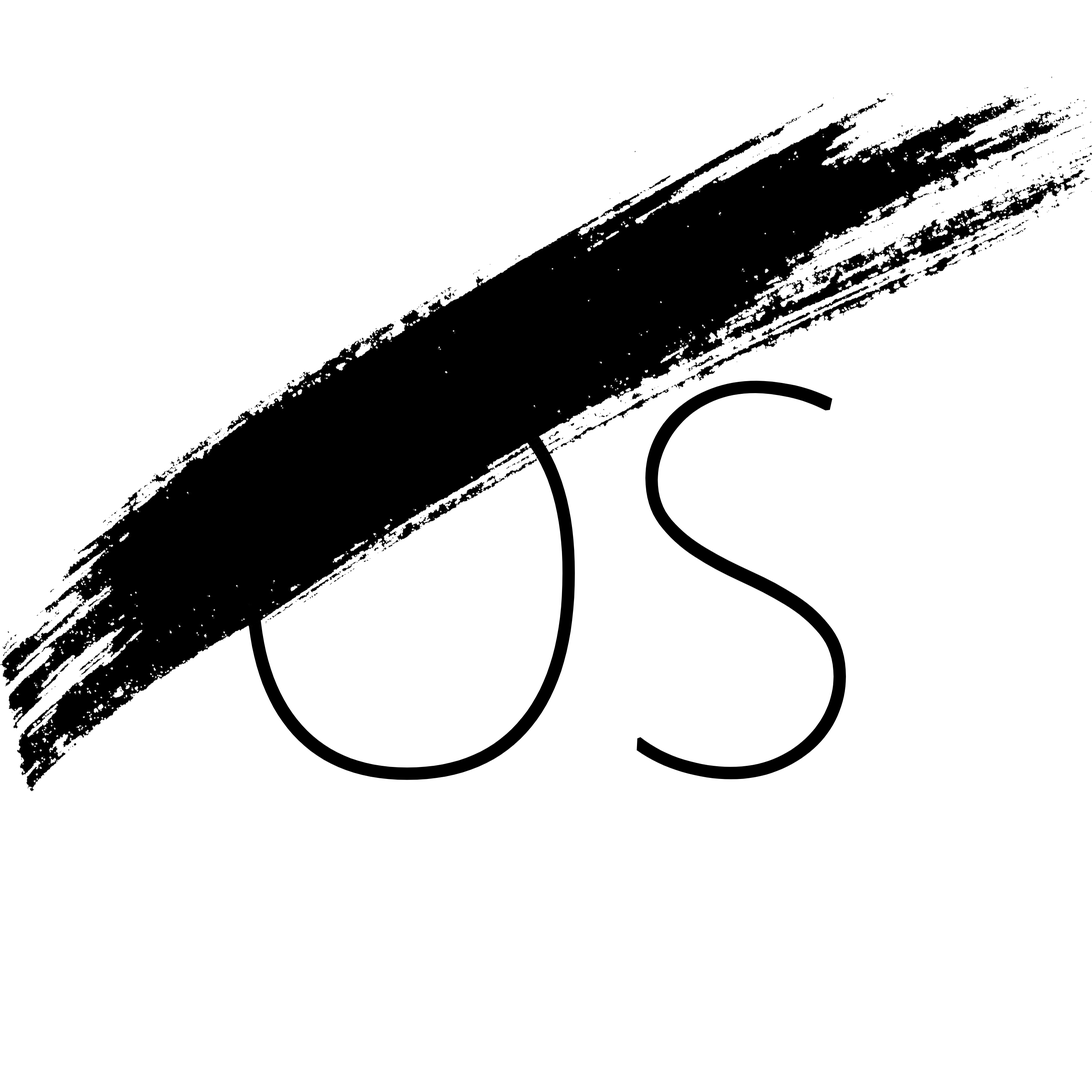
<style>
.page{position:relative;width:1092px;height:1092px;background:#ffffff}
.page>*{position:absolute;margin:0}
.t1{font:618.8px "Datalegreya-Dot";color:#000000}
</style>
<div class="page">
<p class="t1" style="left:246px;top:379px;width:600px;height:401px">OS</p>
</div>
